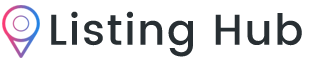
<style>
.page{position:relative;width:310px;height:63px;background:#ffffff}
.page>*{position:absolute;margin:0}
.t1{font:43px "Poppins-Medium";letter-spacing:0.04em;color:#282f33}
</style>
<div class="page">
<p class="t1" style="left:51px;top:11px;width:251px;height:46px">Listing Hub</p>
</div>
